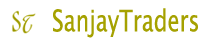
<style>
.page{position:relative;width:200px;height:45px;background:#ffffff}
.page>*{position:absolute;margin:0}
.t1{font:29.8px "LucidaSansUnicode";color:#a5a100;scale:0.73 1}
</style>
<div class="page">
<p class="t1" style="left:53px;top:8px;width:145px;height:30px">SanjayTraders</p>
</div>
